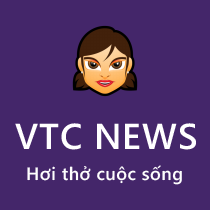
<style>
.page{position:relative;width:210px;height:210px;background:#44266a}
.page>*{position:absolute;margin:0}
.t1{font:36px "SegoeWP-Semibold";letter-spacing:0.025em;color:#ffffff}
.t2{font:18px "SegoeWP-Semibold";letter-spacing:0.025em;color:#fefefe}
</style>
<div class="page">
<p class="t1" style="left:15px;top:123px;width:181px;height:27px">VTC NEWS</p>
<p class="t2" style="left:27px;top:165px;width:155px;height:20px">Hơi thở cuộc sống</p>
</div>
